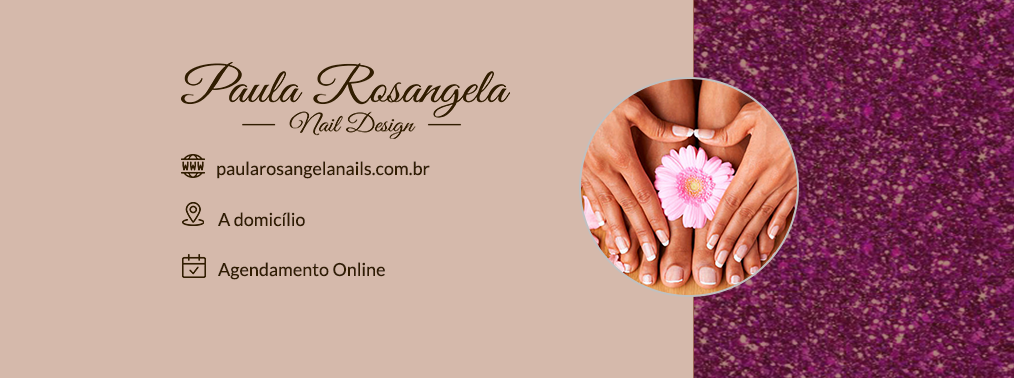
<style>
.page{position:relative;width:1014px;height:378px;background:#d5b9ab}
.page>*{position:absolute;margin:0}
.t1{font:18px "Lato-Regular";color:#311d01}
</style>
<div class="page">
<p class="t1" style="left:217px;top:161px;width:213px;height:18px">paularosangelanails.com.br</p>
<p class="t1" style="left:218px;top:212px;width:87px;height:15px">A domicílio</p>
<p class="t1" style="left:218px;top:262px;width:167px;height:18px">Agendamento Online</p>
</div>
